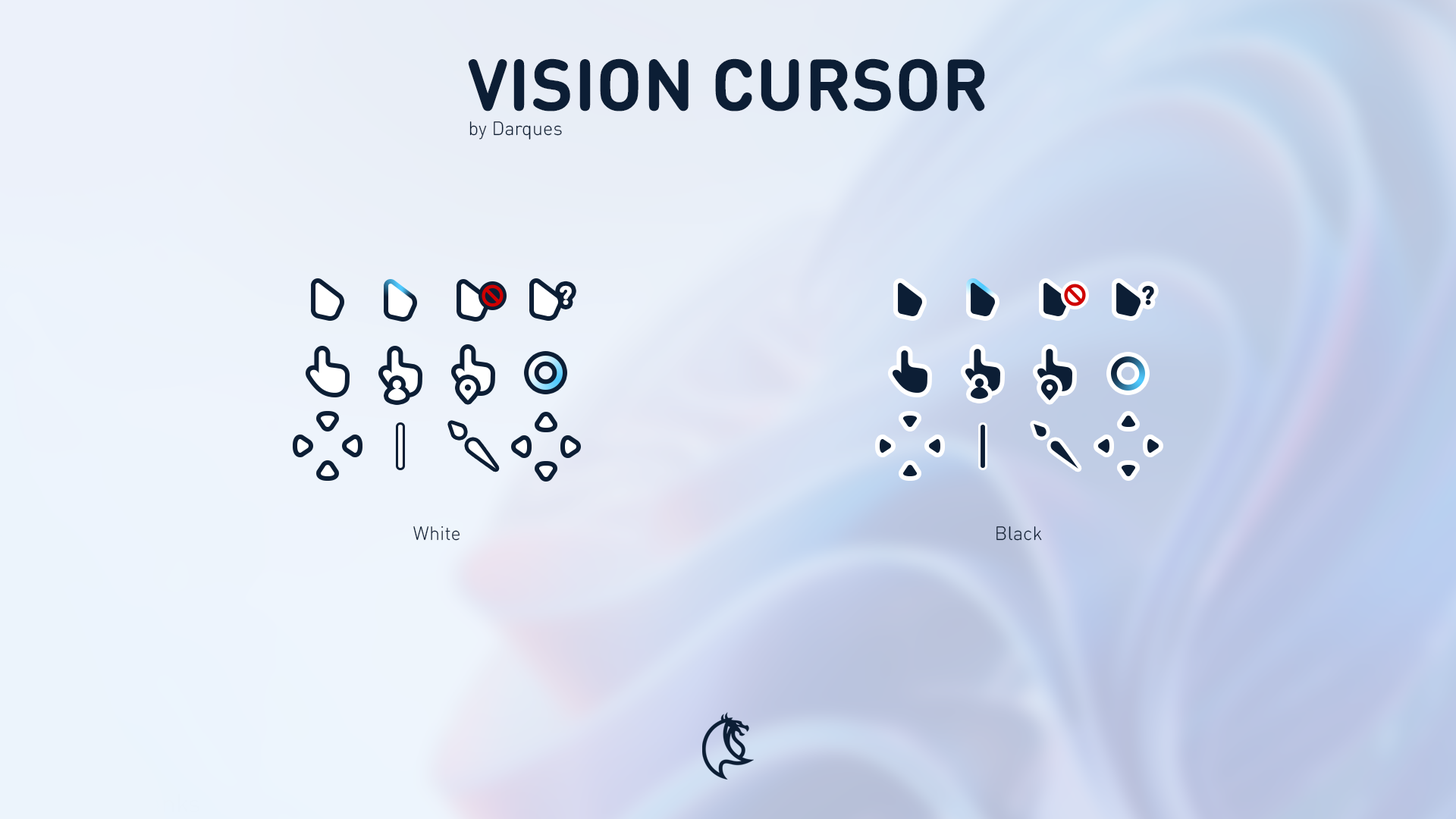
<style>
.page{position:relative;width:1456px;height:819px}
.page>*{position:absolute;margin:0}
.t1{font:72px "DINRoundPro-Bold";letter-spacing:0.005em;color:#0c1e35}
.t2{font:19px "DINRoundPro-Light";letter-spacing:0.005em;color:#0c1e35}
</style>
<div class="page">
<p class="t1" style="left:468px;top:58px;width:517px;height:53px">VISION CURSOR</p>
<p class="t2" style="left:469px;top:121px;width:93px;height:19px">by Darques</p>
<p class="t2" style="left:413px;top:526px;width:47px;height:15px">White</p>
<p class="t2" style="left:996px;top:526px;width:46px;height:15px">Black</p>
</div>
